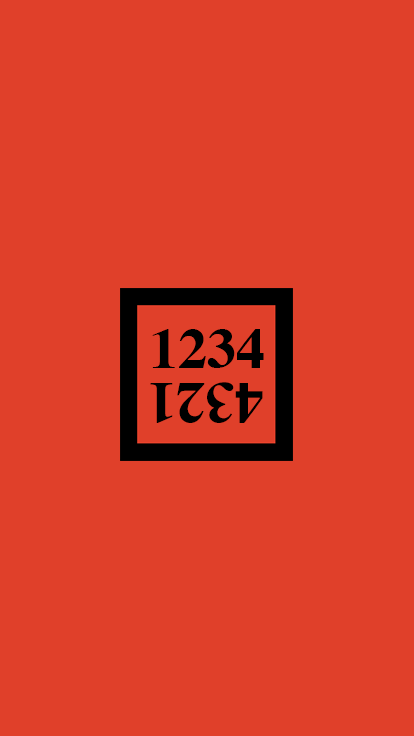
<style>
.page{position:relative;width:414px;height:736px;background:#e0402a}
.page>*{position:absolute;margin:0}
.t1{font:58.3px "Times-Bold";color:#000000;text-transform:uppercase}
</style>
<div class="page">
<p class="t1" style="left:152px;top:329px;width:112px;height:39px">1234</p>
<p class="t1" style="left:150px;top:382px;width:113px;height:41px;rotate:180deg">4321</p>
</div>
